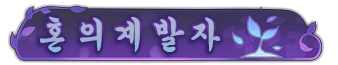
<style>
.page{position:relative;width:338px;height:65px;background:#ffffff}
.page>*{position:absolute;margin:0}
.t1{font:37px "MGungHeulim";color:#a7b4d6;font-weight:bold}
</style>
<div class="page">
<p class="t1" style="left:40px;top:16px;width:181px;height:37px">혼의계발자</p>
</div>
